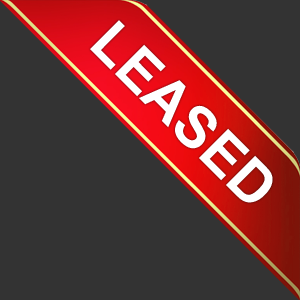
<style>
.page{position:relative;width:300px;height:300px;background:#333333}
.page>*{position:absolute;margin:0}
.t1{font:57.7px "Arial-BoldMT";color:#ffffff;text-transform:uppercase}
</style>
<div class="page">
<p class="t1" style="left:90px;top:20px;width:183px;height:183px;rotate:45deg">LEASED</p>
</div>
